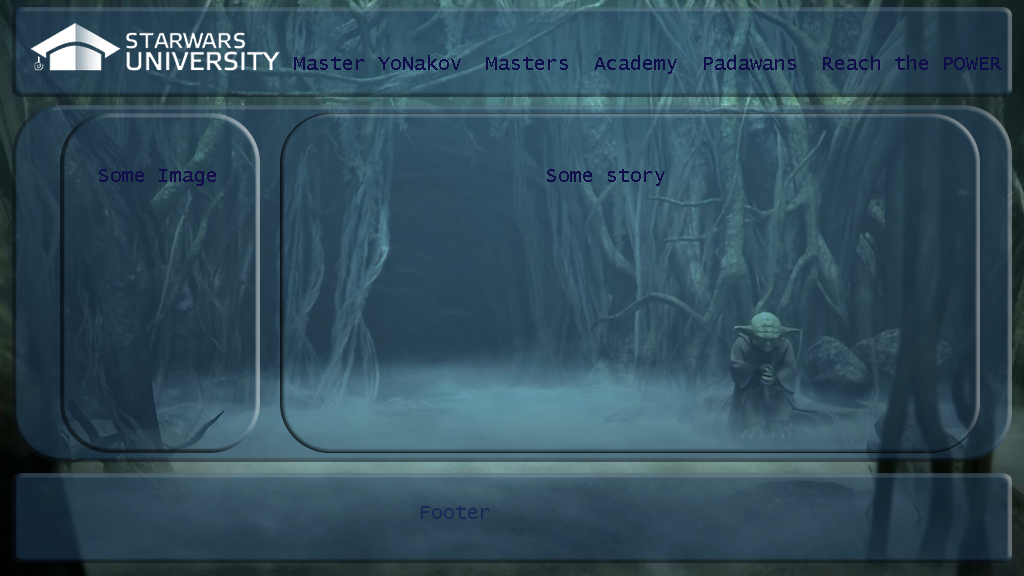
<style>
.page{position:relative;width:1024px;height:576px}
.page>*{position:absolute;margin:0}
.t1{font:20px "LucidaConsole";color:#100d4a}
.t2{font:20px "LucidaConsole";color:#1a2958}
</style>
<div class="page">
<p class="t1" style="left:294px;top:55px;width:708px;height:19px">Master YoNakov  Masters  Academy  Padawans  Reach the POWER</p>
<p class="t1" style="left:99px;top:169px;width:117px;height:17px">Some Image</p>
<p class="t1" style="left:547px;top:169px;width:118px;height:17px">Some story</p>
<p class="t2" style="left:421px;top:506px;width:68px;height:13px">Footer</p>
</div>
